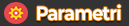
<style>
.page{position:relative;width:129px;height:26px;background:#333333}
.page>*{position:absolute;margin:0}
.t1{font:19.4px "Montserrat-Bold";letter-spacing:-0.04em;color:#ffffff;scale:0.9 1}
</style>
<div class="page">
<p class="t1" style="left:37px;top:4px;width:84px;height:17px">Parametri</p>
</div>
